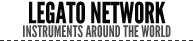
<style>
.page{position:relative;width:193px;height:41px;background:#ffffff}
.page>*{position:absolute;margin:0}
.t1{font:28.8px "LeagueGothic";color:#060606}
.t2{font:15.8px "LeagueGothic";color:#4c4b4b}
</style>
<div class="page">
<p class="t1" style="left:29px;top:1px;width:137px;height:23px">LEGATO NETWORK</p>
<p class="t2" style="left:23px;top:25px;width:148px;height:13px">INSTRUMENTS AROUND THE WORLD</p>
</div>
